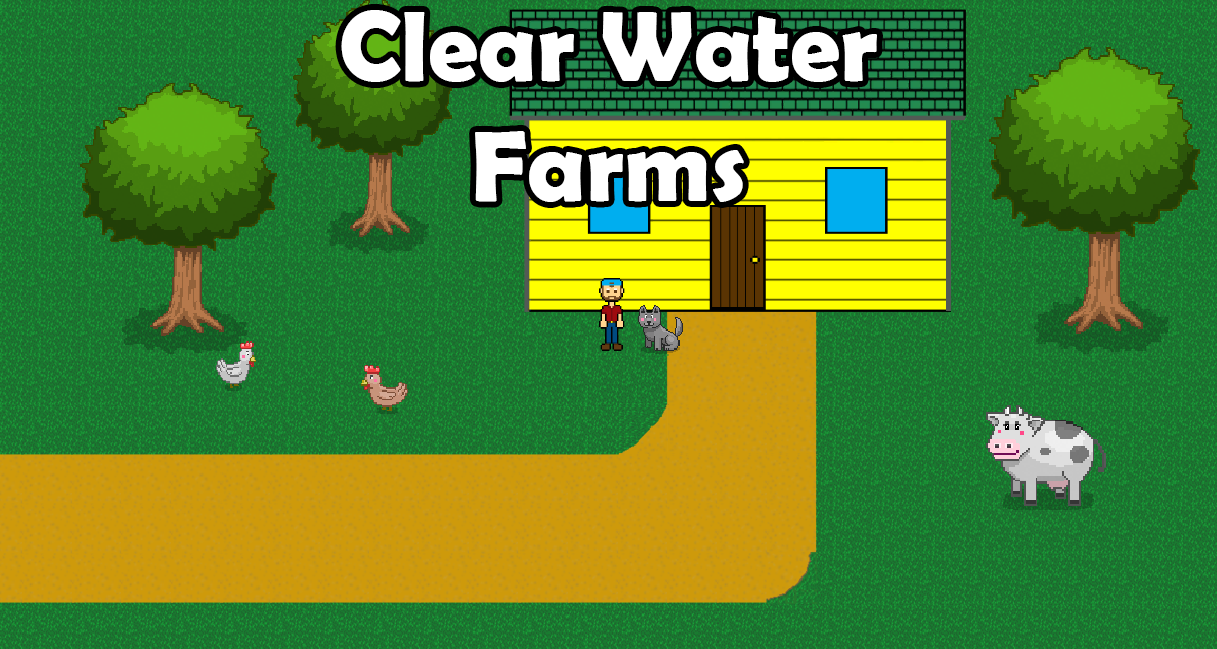
<style>
.page{position:relative;width:1217px;height:649px}
.page>*{position:absolute;margin:0}
.t1{font:100px "BerlinSansFBDemi-Bold";color:#ffffff}
</style>
<div class="page">
<p class="t1" style="left:341px;top:10px;width:536px;height:192px;text-align:center">Clear Water<br>Farms</p>
</div>
